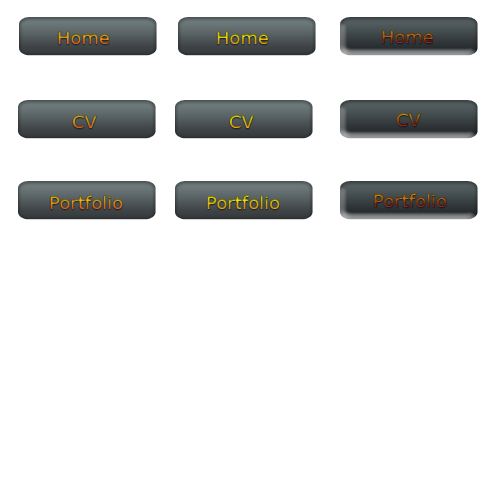
<style>
.page{position:relative;width:500px;height:500px;background:#ffffff}
.page>*{position:absolute;margin:0}
.t1{font:18px "Verdana"}
</style>
<div class="page">
<p class="t1" style="left:382px;top:30px;width:51px;height:13px">Home</p>
<p class="t1" style="left:58px;top:31px;width:51px;height:13px">Home</p>
<p class="t1" style="left:217px;top:31px;width:51px;height:13px">Home</p>
<p class="t1" style="left:396px;top:113px;width:25px;height:13px">CV</p>
<p class="t1" style="left:72px;top:115px;width:25px;height:13px">CV</p>
<p class="t1" style="left:229px;top:115px;width:25px;height:13px">CV</p>
<p class="t1" style="left:50px;top:195px;width:73px;height:14px">Portfolio</p>
<p class="t1" style="left:207px;top:195px;width:73px;height:14px">Portfolio</p>
<p class="t1" style="left:374px;top:193px;width:73px;height:14px">Portfolio</p>
</div>
